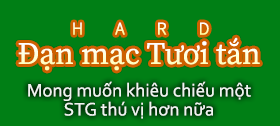
<style>
.page{position:relative;width:280px;height:126px;background:#007f15}
.page>*{position:absolute;margin:0}
.t1{font:31px "SourceSerifRoman-Regular"}
.t2{font:19px/19px "Corbel";color:#ffffff}
</style>
<div class="page">
<p class="t1" style="left:18px;top:37px;width:242px;height:34px">Đạn mạc Tươi tắn</p>
<p class="t2" style="left:28px;top:81px;width:223px;height:38px;text-align:center;opacity:0.9">Mong muốn khiêu chiếu một<br>STG thú vị hơn nữa</p>
</div>
